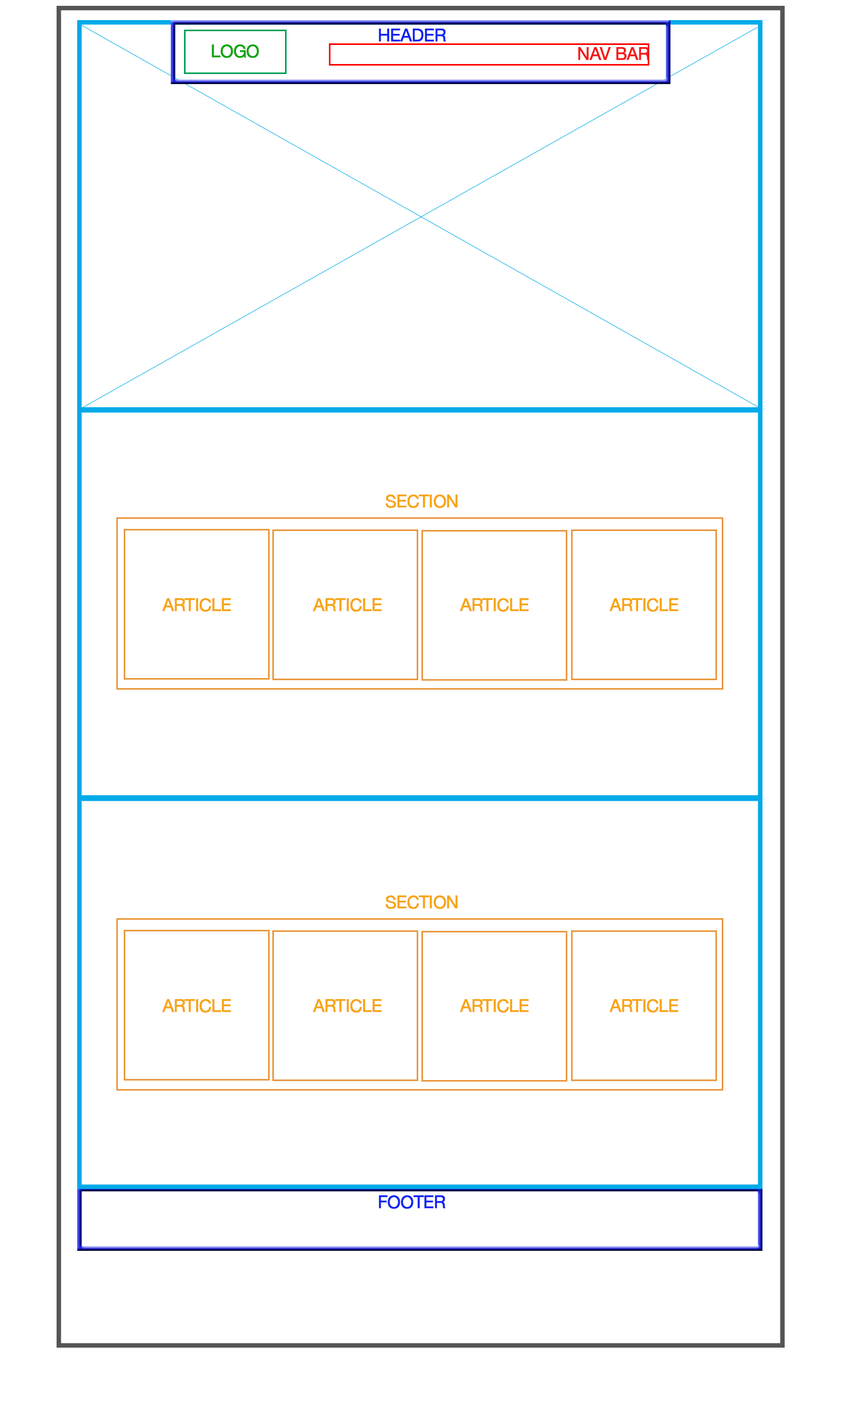
<style>
.page{position:relative;width:846px;height:1409px;background:#ffffff}
.page>*{position:absolute;margin:0}
.t1{font:17.5px "HelveticaNeue";letter-spacing:-0.04em;color:#0f23f2;font-weight:bold}
.t2{font:17.5px "HelveticaNeue";letter-spacing:-0.04em;color:#0ca50c;font-weight:bold}
.t3{font:17.5px "HelveticaNeue";letter-spacing:-0.04em;color:#f51a1a;font-weight:bold}
.t4{font:17.5px "HelveticaNeue";letter-spacing:-0.04em;color:#f7a413;font-weight:bold}
</style>
<div class="page">
<p class="t1" style="left:379px;top:29px;width:67px;height:13px">HEADER</p>
<p class="t2" style="left:212px;top:44px;width:47px;height:14px">LOGO</p>
<p class="t3" style="left:578px;top:47px;width:72px;height:13px">NAV BAR</p>
<p class="t4" style="left:386px;top:495px;width:72px;height:13px">SECTION</p>
<p class="t4" style="left:162px;top:598px;width:69px;height:14px">ARTICLE</p>
<p class="t4" style="left:313px;top:598px;width:69px;height:14px">ARTICLE</p>
<p class="t4" style="left:460px;top:598px;width:69px;height:14px">ARTICLE</p>
<p class="t4" style="left:609px;top:598px;width:70px;height:14px">ARTICLE</p>
<p class="t4" style="left:386px;top:895px;width:72px;height:14px">SECTION</p>
<p class="t4" style="left:162px;top:999px;width:69px;height:14px">ARTICLE</p>
<p class="t4" style="left:313px;top:999px;width:69px;height:14px">ARTICLE</p>
<p class="t4" style="left:460px;top:999px;width:69px;height:14px">ARTICLE</p>
<p class="t4" style="left:609px;top:999px;width:70px;height:14px">ARTICLE</p>
<p class="t1" style="left:379px;top:1195px;width:67px;height:14px">FOOTER</p>
</div>
